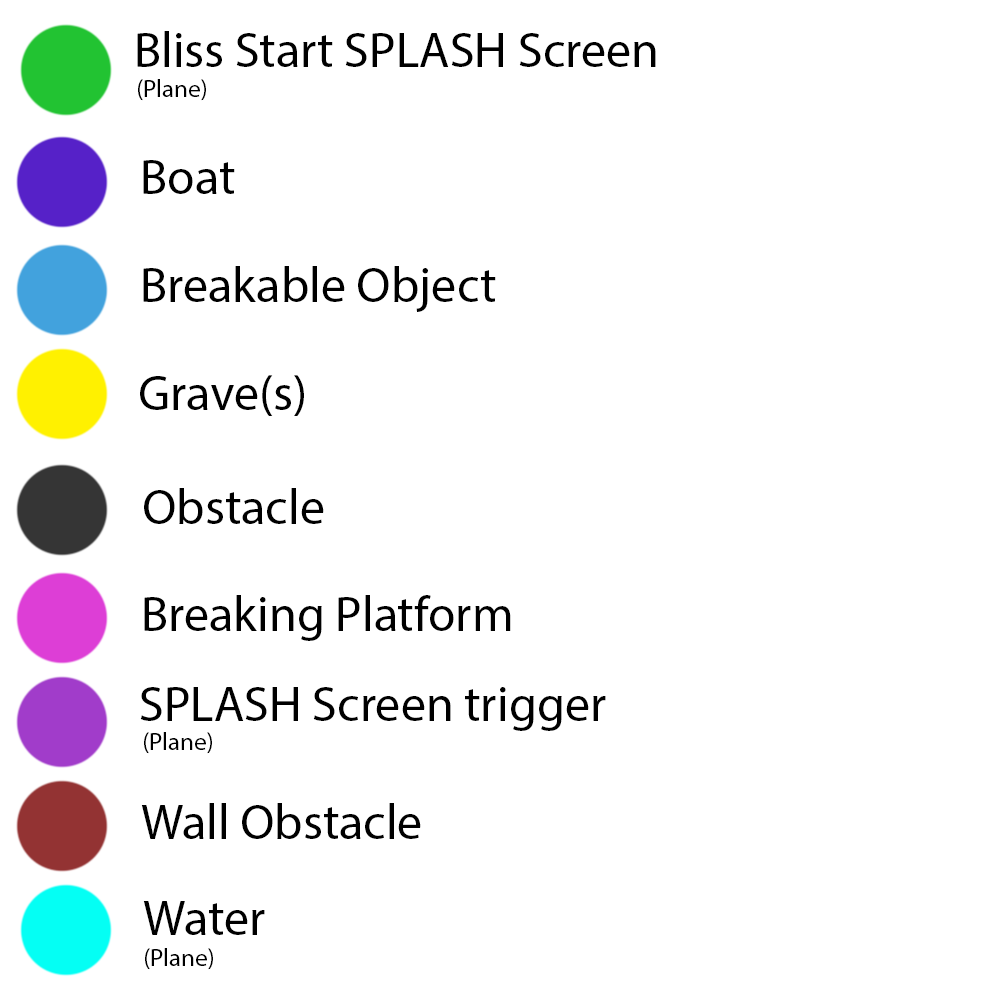
<style>
.page{position:relative;width:1000px;height:1000px;background:#ffffff}
.page>*{position:absolute;margin:0}
.t1{font:50px "MyriadPro-Regular";color:#000000}
.t2{font:25px "MyriadPro-Regular";color:#000000}
</style>
<div class="page">
<p class="t1" style="left:137px;top:31px;width:519px;height:36px">Bliss Start SPLASH Screen</p>
<p class="t2" style="left:138px;top:79px;width:68px;height:22px">(Plane)</p>
<p class="t1" style="left:143px;top:160px;width:92px;height:34px">Boat</p>
<p class="t1" style="left:143px;top:266px;width:353px;height:46px">Breakable Object</p>
<p class="t1" style="left:140px;top:375px;width:164px;height:41px">Grave(s)</p>
<p class="t1" style="left:144px;top:488px;width:180px;height:36px">Obstacle</p>
<p class="t1" style="left:144px;top:595px;width:367px;height:46px">Breaking Platform</p>
<p class="t1" style="left:140px;top:687px;width:466px;height:44px">SPLASH Screen trigger</p>
<p class="t2" style="left:144px;top:732px;width:68px;height:22px">(Plane)</p>
<p class="t1" style="left:141px;top:803px;width:280px;height:36px">Wall Obstacle</p>
<p class="t1" style="left:143px;top:901px;width:122px;height:34px">Water</p>
<p class="t2" style="left:145px;top:948px;width:68px;height:22px">(Plane)</p>
</div>
